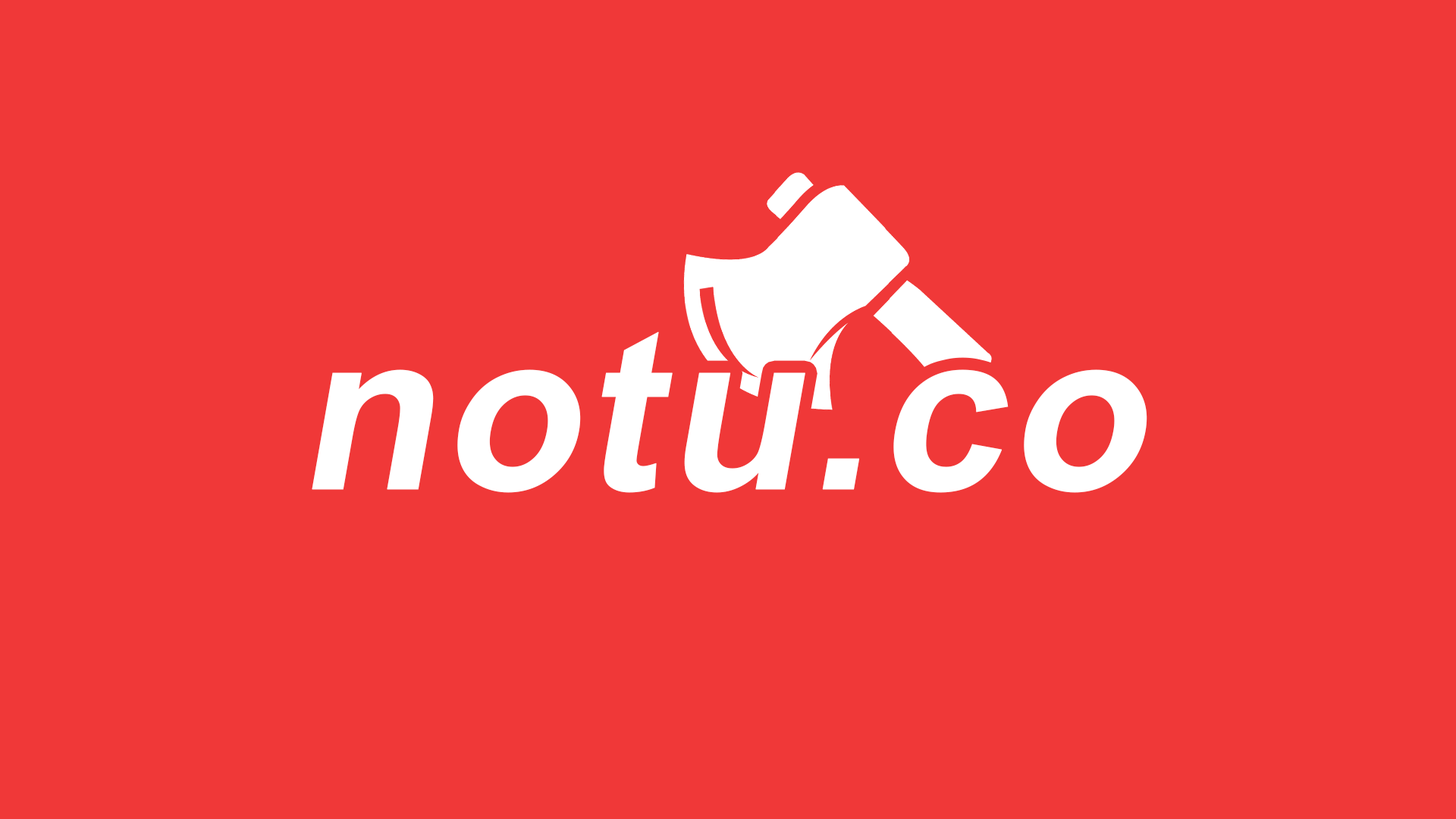
<style>
.page{position:relative;width:1456px;height:819px;background:#f03838}
.page>*{position:absolute;margin:0}
.t1{font:223.7px "Arial-BoldMT";color:#ffffff;font-weight:bold;font-style:italic}
</style>
<div class="page">
<p class="t1" style="left:312px;top:331px;width:835px;height:162px">notu.co</p>
</div>
